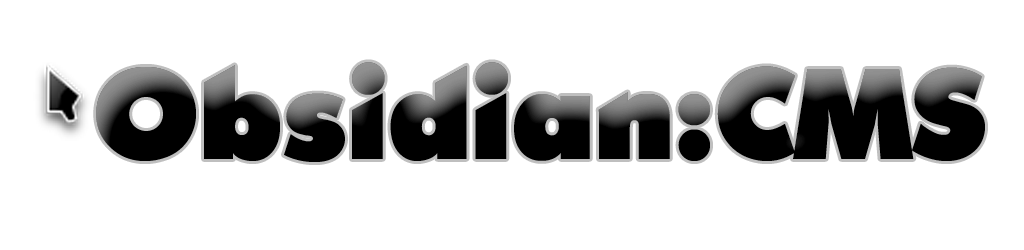
<style>
.page{position:relative;width:1024px;height:250px;background:#ffffff}
.page>*{position:absolute;margin:0}
.t1{font:125px "OpineHeavy";color:#000000}
</style>
<div class="page">
<p class="t1" style="left:96px;top:62px;width:889px;height:100px">Obsidian:CMS</p>
<p class="t1" style="left:96px;top:62px;width:889px;height:100px">Obsidian:CMS</p>
<p class="t1" style="left:96px;top:62px;width:889px;height:100px">Obsidian:CMS</p>
</div>
